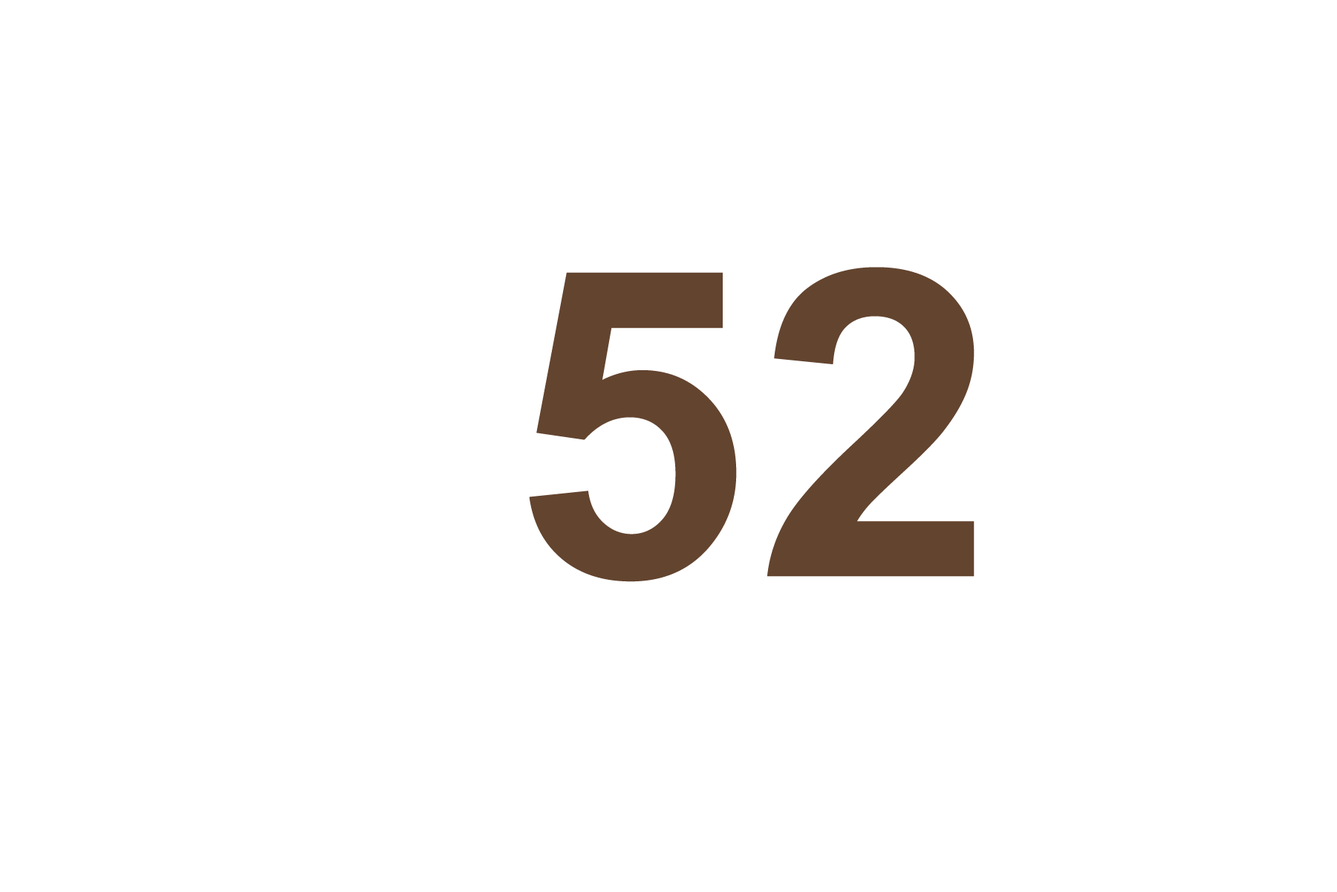
<style>
.page{position:relative;width:1337px;height:892px;background:#ffffff}
.page>*{position:absolute;margin:0}
.t1{font:429.6px "Arial-BoldMT";color:#63442f}
</style>
<div class="page">
<p class="t1" style="left:529px;top:267px;width:446px;height:315px">52</p>
</div>
